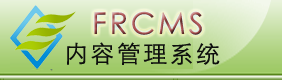
<style>
.page{position:relative;width:282px;height:80px}
.page>*{position:absolute;margin:0}
.t1{font:30px "STXihei";letter-spacing:0.1em}
.t2{font:24px "STXihei";letter-spacing:0.1em;color:#0e0f0e}
</style>
<div class="page">
<p class="t1" style="left:94px;top:11px;width:108px;height:24px">FRCMS</p>
<p class="t2" style="left:67px;top:42px;width:153px;height:23px">内容管理系统</p>
</div>
